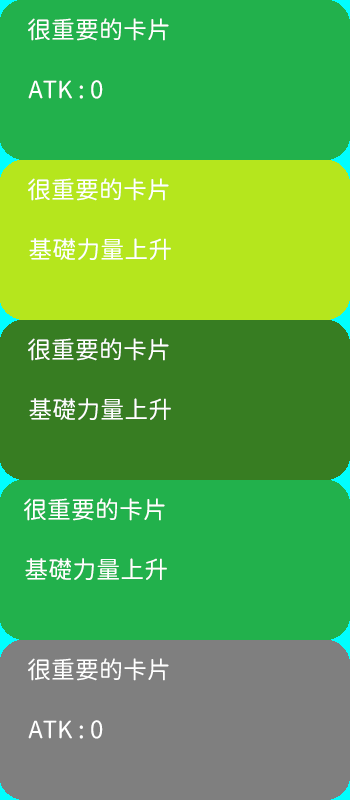
<style>
.page{position:relative;width:350px;height:800px;background:#22b14c}
.page>*{position:absolute;margin:0}
.t1{font:24px "GenSenRoundedTW-R";color:#ffffff}
</style>
<div class="page">
<p class="t1" style="left:28px;top:18px;width:141px;height:23px">很重要的卡片</p>
<p class="t1" style="left:28px;top:80px;width:75px;height:19px">ATK : 0</p>
<p class="t1" style="left:28px;top:178px;width:141px;height:23px">很重要的卡片</p>
<p class="t1" style="left:29px;top:238px;width:142px;height:22px">基礎力量上升</p>
<p class="t1" style="left:28px;top:338px;width:141px;height:23px">很重要的卡片</p>
<p class="t1" style="left:29px;top:398px;width:142px;height:22px">基礎力量上升</p>
<p class="t1" style="left:24px;top:498px;width:141px;height:23px">很重要的卡片</p>
<p class="t1" style="left:25px;top:558px;width:142px;height:22px">基礎力量上升</p>
<p class="t1" style="left:28px;top:658px;width:141px;height:23px">很重要的卡片</p>
<p class="t1" style="left:28px;top:720px;width:75px;height:19px">ATK : 0</p>
</div>
